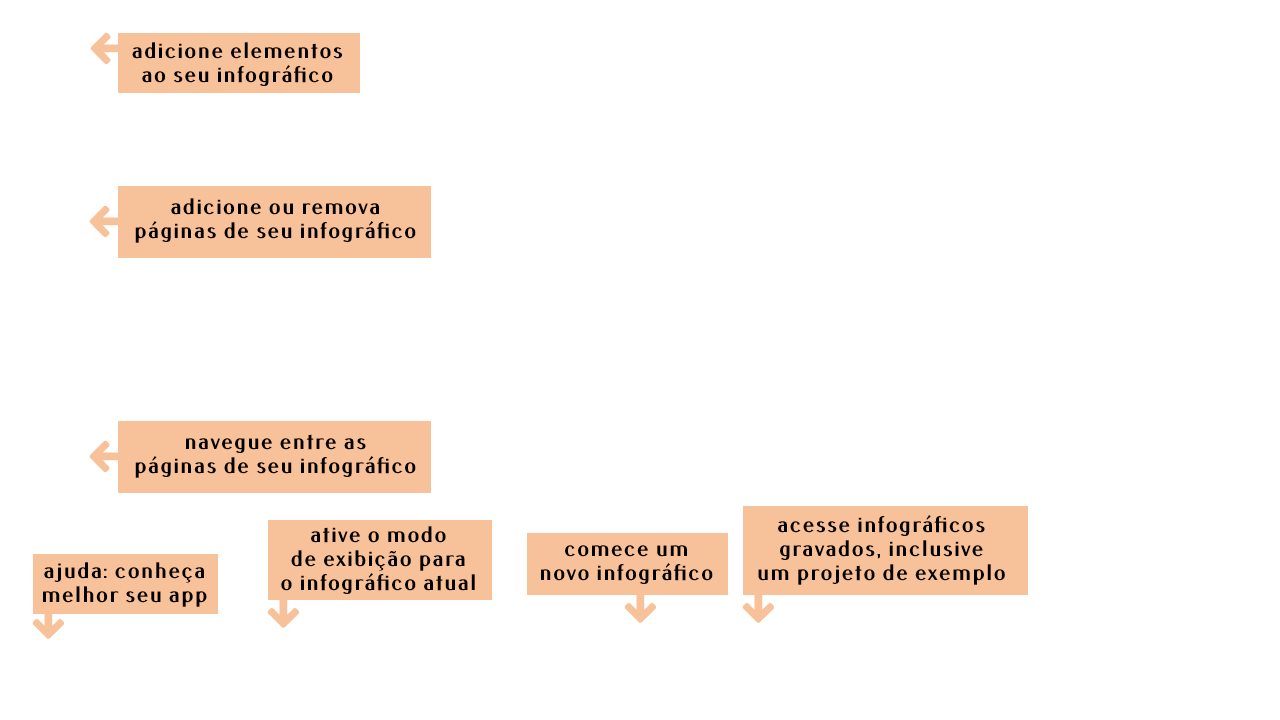
<style>
.page{position:relative;width:1280px;height:720px;background:#ffffff}
.page>*{position:absolute;margin:0}
.t1{font:24px/24px "PfennigBold";letter-spacing:0.04em;color:#000000}
</style>
<div class="page">
<p class="t1" style="left:132px;top:42px;width:210px;height:44px;text-align:center">adicione elementos<br>ao seu infográfico</p>
<p class="t1" style="left:135px;top:198px;width:281px;height:45px;text-align:center">adicione ou remova<br>páginas de seu infográfico</p>
<p class="t1" style="left:135px;top:434px;width:281px;height:44px;text-align:center">navegue entre as<br>páginas de seu infográfico</p>
<p class="t1" style="left:758px;top:515px;width:247px;height:70px;text-align:center">acesse infográficos<br>gravados, inclusive<br>um projeto de exemplo</p>
<p class="t1" style="left:281px;top:526px;width:194px;height:68px;text-align:center">ative o modo<br>de exibição para<br>o infográfico atual</p>
<p class="t1" style="left:541px;top:545px;width:172px;height:39px;text-align:center">comece um<br>novo infográfico</p>
<p class="t1" style="left:43px;top:562px;width:164px;height:45px;text-align:center">ajuda: conheça<br>melhor seu app</p>
</div>
